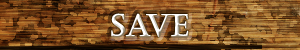
<style>
.page{position:relative;width:300px;height:50px}
.page>*{position:absolute;margin:0}
.t1{font:30px "Castellar";color:#ffffff;font-weight:bold}
</style>
<div class="page">
<p class="t1" style="left:111px;top:13px;width:78px;height:24px">Save</p>
</div>
